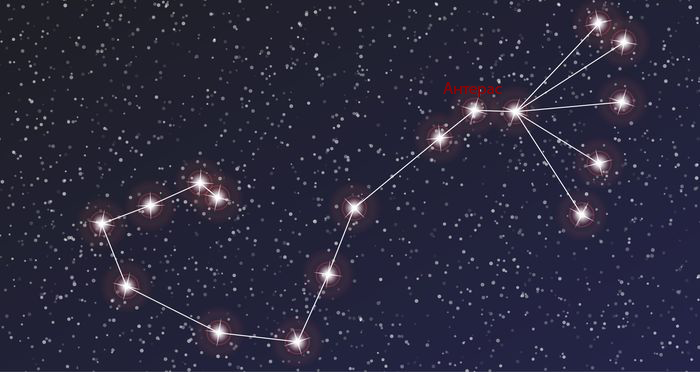
<style>
.page{position:relative;width:700px;height:372px}
.page>*{position:absolute;margin:0}
.t1{font:12px "MyriadPro-Regular";color:#8c0000}
</style>
<div class="page">
<p class="t1" style="left:443px;top:82px;width:59px;height:15px">Антерас</p>
</div>
